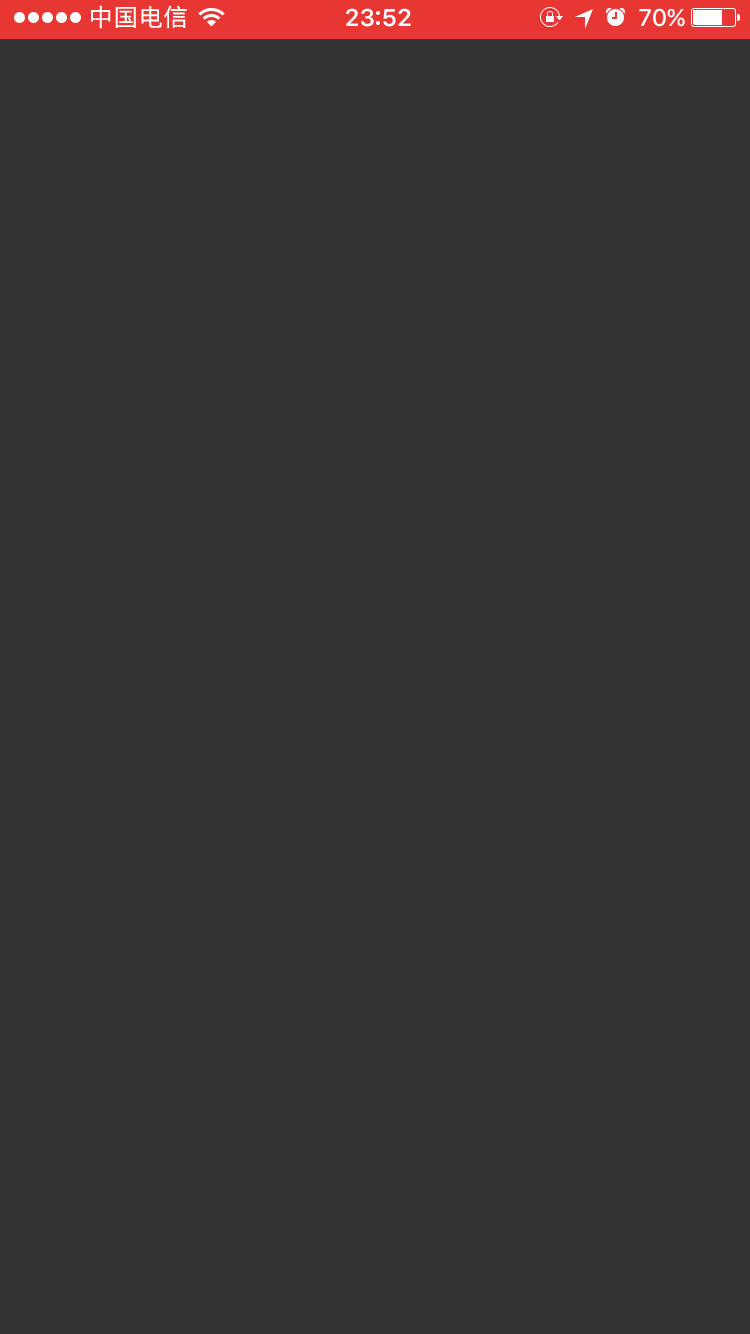
<style>
.page{position:relative;width:750px;height:1334px;background:#333333}
.page>*{position:absolute;margin:0}
.t1{font:24px "PingFang-SC-Medium";letter-spacing:0.04em;color:#ffffff}
.t2{font:24px "SFUIText-Semibold";color:#ffffff}
.t3{font:24px "SFUIDisplay-Medium";color:#ffffff}
</style>
<div class="page">
<p class="t1" style="left:91px;top:5px;width:96px;height:24px">中国电信</p>
<p class="t2" style="left:346px;top:8px;width:65px;height:19px">23 52</p>
<p class="t3" style="left:639px;top:8px;width:46px;height:19px">70%</p>
</div>
